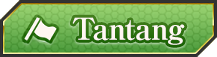
<style>
.page{position:relative;width:217px;height:57px}
.page>*{position:absolute;margin:0}
.t1{font:30px "RyuminPro-ExBold";letter-spacing:-0.04em;color:#fff7f3}
</style>
<div class="page">
<p class="t1" style="left:72px;top:17px;width:113px;height:28px">Tantang</p>
</div>
